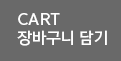
<style>
.page{position:relative;width:121px;height:61px;background:#696969}
.page>*{position:absolute;margin:0}
.t1{font:14.7px "YoonGothicPro770";color:#ffffff}
</style>
<div class="page">
<p class="t1" style="left:17px;top:13px;width:90px;height:33px">CART<br>장바구니 담기</p>
</div>
